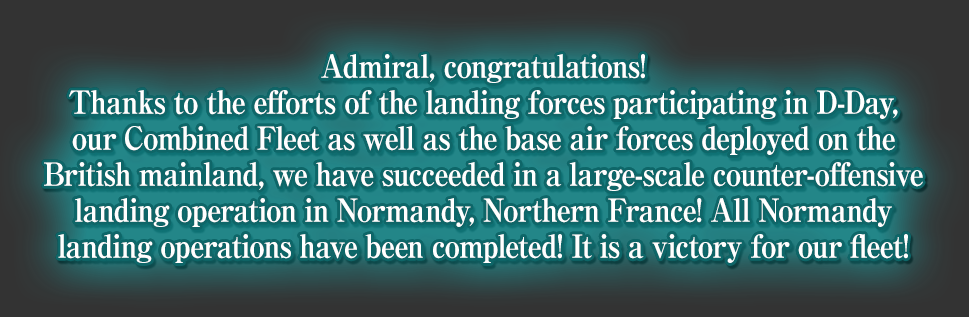
<style>
.page{position:relative;width:969px;height:317px}
.page>*{position:absolute;margin:0}
.t1{font:32px/36px "RyuminPro-ExBold";letter-spacing:-0.04em;color:#ffffff;scale:0.9 1}
</style>
<div class="page">
<p class="t1" style="left:44px;top:54px;width:879px;height:209px;text-align:center">Admiral, congratulations!<br>Thanks to the efforts of the landing forces participating in D-Day,<br>our Combined Fleet as well as the base air forces deployed on the<br>British mainland, we have succeeded in a large-scale counter-offensive<br>landing operation in Normandy, Northern France! All Normandy<br>landing operations have been completed! It is a victory for our fleet!</p>
</div>
